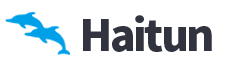
<style>
.page{position:relative;width:228px;height:67px;background:#ffffff}
.page>*{position:absolute;margin:0}
.t1{font:43px "NotoSansHans-Black";letter-spacing:-0.06em;color:#31333e}
</style>
<div class="page">
<p class="t1" style="left:83px;top:15px;width:129px;height:37px">Haitun</p>
</div>
